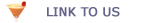
<style>
.page{position:relative;width:145px;height:23px;background:#ffffff}
.page>*{position:absolute;margin:0}
.t1{font:12px "Verdana";color:#636388;font-weight:bold}
</style>
<div class="page">
<p class="t1" style="left:47px;top:7px;width:73px;height:10px">LINK TO US</p>
</div>
